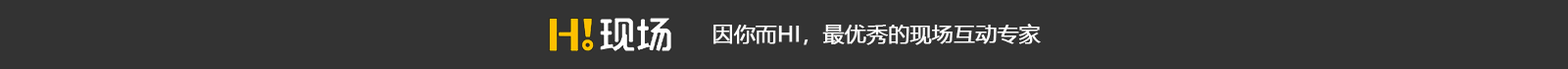
<style>
.page{position:relative;width:1568px;height:69px;background:#333333}
.page>*{position:absolute;margin:0}
.t1{font:21px "MicrosoftYaHei";color:#ffffff;font-weight:bold}
</style>
<div class="page">
<p class="t1" style="left:713px;top:24px;width:328px;height:21px">因你而HI，最优秀的现场互动专家</p>
</div>
